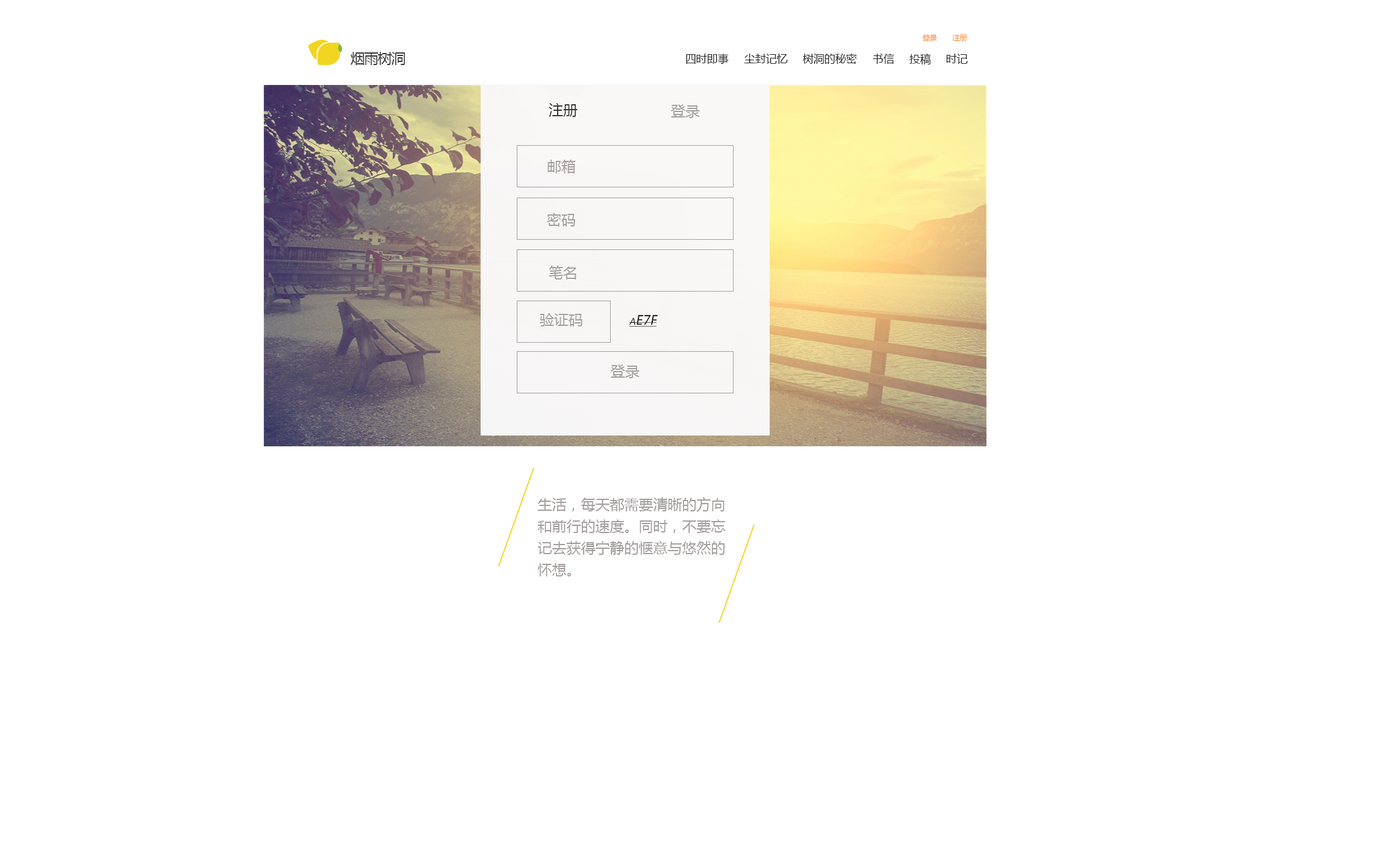
<style>
.page{position:relative;width:1378px;height:865px;background:#ffffff}
.page>*{position:absolute;margin:0}
.t1{font:7.2px "MicrosoftYaHei";color:#fc903b}
.t2{font:14.5px "MicrosoftYaHei";letter-spacing:-0.06em;color:#383636}
.t3{font:10.8px "MicrosoftYaHei";color:#252323}
.t4{font:14.5px "MicrosoftYaHei";color:#383636}
.t5{font:14.5px "MicrosoftYaHei";color:#a39d9d}
.t6{font:21.7px "MicrosoftYaHei";color:#212020;font-variant:small-caps;font-style:italic;text-decoration:underline}
.t7{font:14.5px/21.7px "MicrosoftYaHei";color:#a39d9d}
</style>
<div class="page">
<p class="t1" style="left:922px;top:34px;width:15px;height:8px">登录</p>
<p class="t1" style="left:952px;top:34px;width:16px;height:8px">注册</p>
<p class="t2" style="left:351px;top:52px;width:54px;height:13px">烟雨树洞</p>
<p class="t3" style="left:686px;top:54px;width:43px;height:10px">四时即事</p>
<p class="t3" style="left:744px;top:54px;width:44px;height:10px">尘封记忆</p>
<p class="t3" style="left:803px;top:54px;width:54px;height:10px">树洞的秘密</p>
<p class="t3" style="left:873px;top:54px;width:22px;height:10px">书信</p>
<p class="t3" style="left:910px;top:54px;width:21px;height:10px">投稿</p>
<p class="t3" style="left:946px;top:54px;width:22px;height:10px">时记</p>
<p class="t4" style="left:549px;top:103px;width:29px;height:14px">注册</p>
<p class="t5" style="left:671px;top:104px;width:29px;height:14px">登录</p>
<p class="t5" style="left:548px;top:160px;width:28px;height:14px">邮箱</p>
<p class="t5" style="left:547px;top:213px;width:28px;height:14px">密码</p>
<p class="t5" style="left:549px;top:266px;width:28px;height:14px">笔名</p>
<p class="t5" style="left:540px;top:313px;width:43px;height:14px">验证码</p>
<p class="t6" style="left:629px;top:314px;width:29px;height:13px">aE7F</p>
<p class="t5" style="left:611px;top:364px;width:29px;height:14px">登录</p>
<p class="t7" style="left:537px;top:497px;width:189px;height:80px">生活，每天都需要清晰的方向<br>和前行的速度。同时，不要忘<br>记去获得宁静的惬意与悠然的<br>怀想。</p>
</div>
